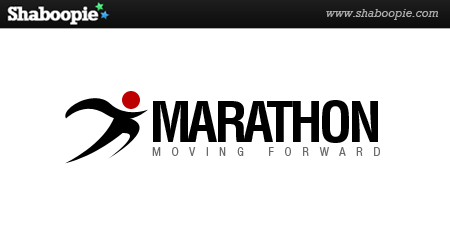
<style>
.page{position:relative;width:450px;height:250px;background:#ffffff}
.page>*{position:absolute;margin:0}
.t1{font:55.3px "Helvetica-Condensed-Bold";letter-spacing:-0.08em;color:#000000}
.t2{font:12.5px "HelveticaNeueLTStd-LtCn";letter-spacing:0.87em;color:#6a6a6a;text-transform:uppercase}
</style>
<div class="page">
<p class="t1" style="left:153px;top:100px;width:225px;height:43px">MARATHON</p>
<p class="t2" style="left:152px;top:147px;width:228px;height:9px">moving forward</p>
</div>
